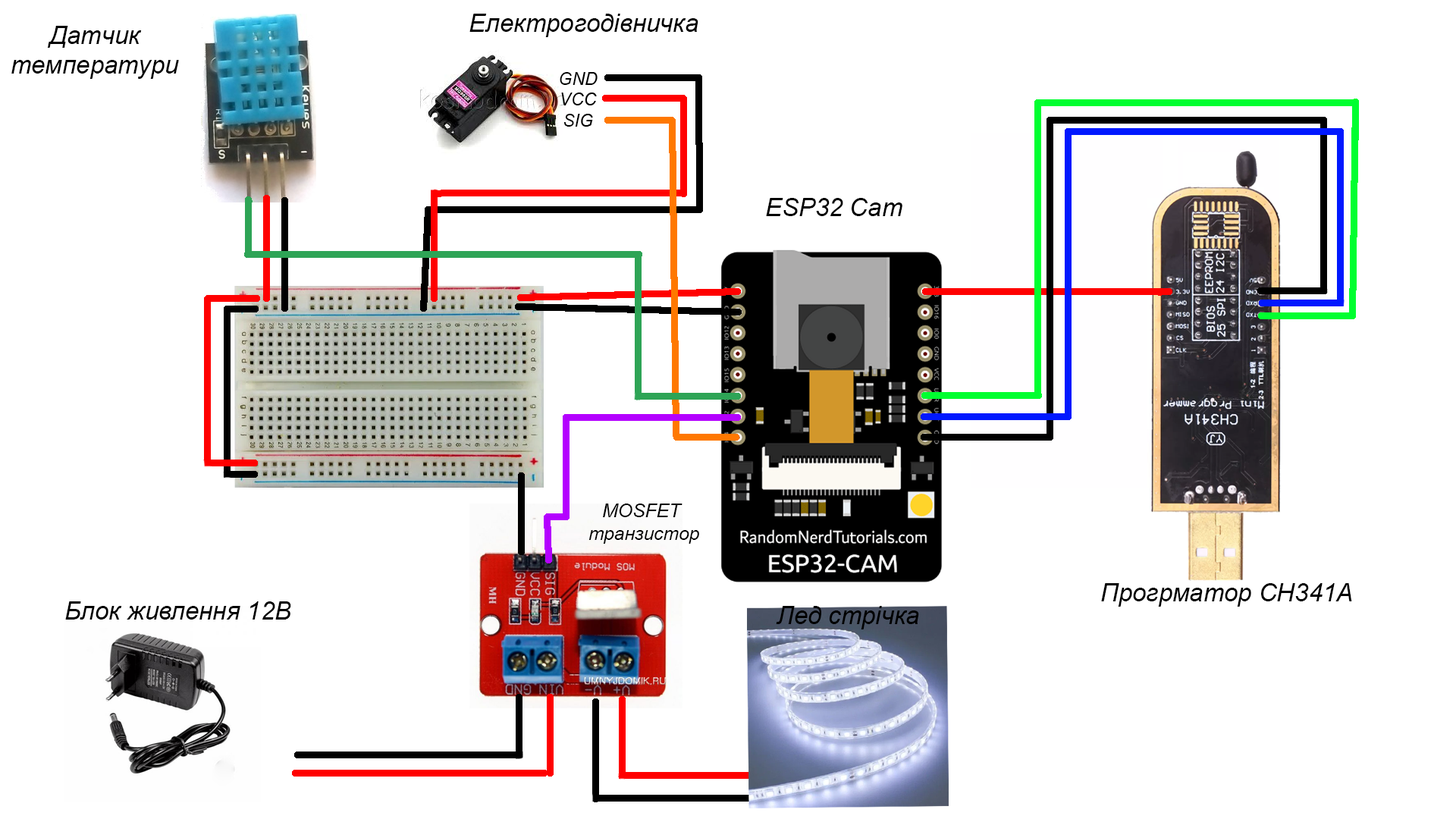
<style>
.page{position:relative;width:1456px;height:819px;background:#ffffff}
.page>*{position:absolute;margin:0}
.t1{font:25px "Arial-ItalicMT";color:#000000}
.t2{font:18.7px "Arial-ItalicMT";color:#000000}
</style>
<div class="page">
<p class="t1" style="left:469px;top:14px;width:229px;height:23px">Електрогодівничка</p>
<p class="t1" style="left:11px;top:26px;width:168px;height:53px;text-align:center">Датчик<br>температури</p>
<p class="t1" style="left:766px;top:198px;width:136px;height:18px">ESP32 Cam</p>
<p class="t2" style="left:588px;top:504px;width:111px;height:40px;text-align:center">MOSFET <br>транзистор</p>
<p class="t1" style="left:1101px;top:583px;width:251px;height:24px">Прогрматор CH341A</p>
<p class="t1" style="left:65px;top:601px;width:226px;height:19px">Блок живлення 12В</p>
<p class="t1" style="left:776px;top:606px;width:143px;height:23px">Лед стрічка</p>
</div>
